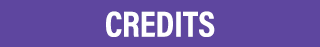
<style>
.page{position:relative;width:320px;height:47px;background:#5e469f}
.page>*{position:absolute;margin:0}
.t1{font:36.3px "AcuminProCond-Bold";color:#ffffff;text-transform:uppercase}
</style>
<div class="page">
<p class="t1" style="left:106px;top:11px;width:109px;height:26px">Credits</p>
</div>
